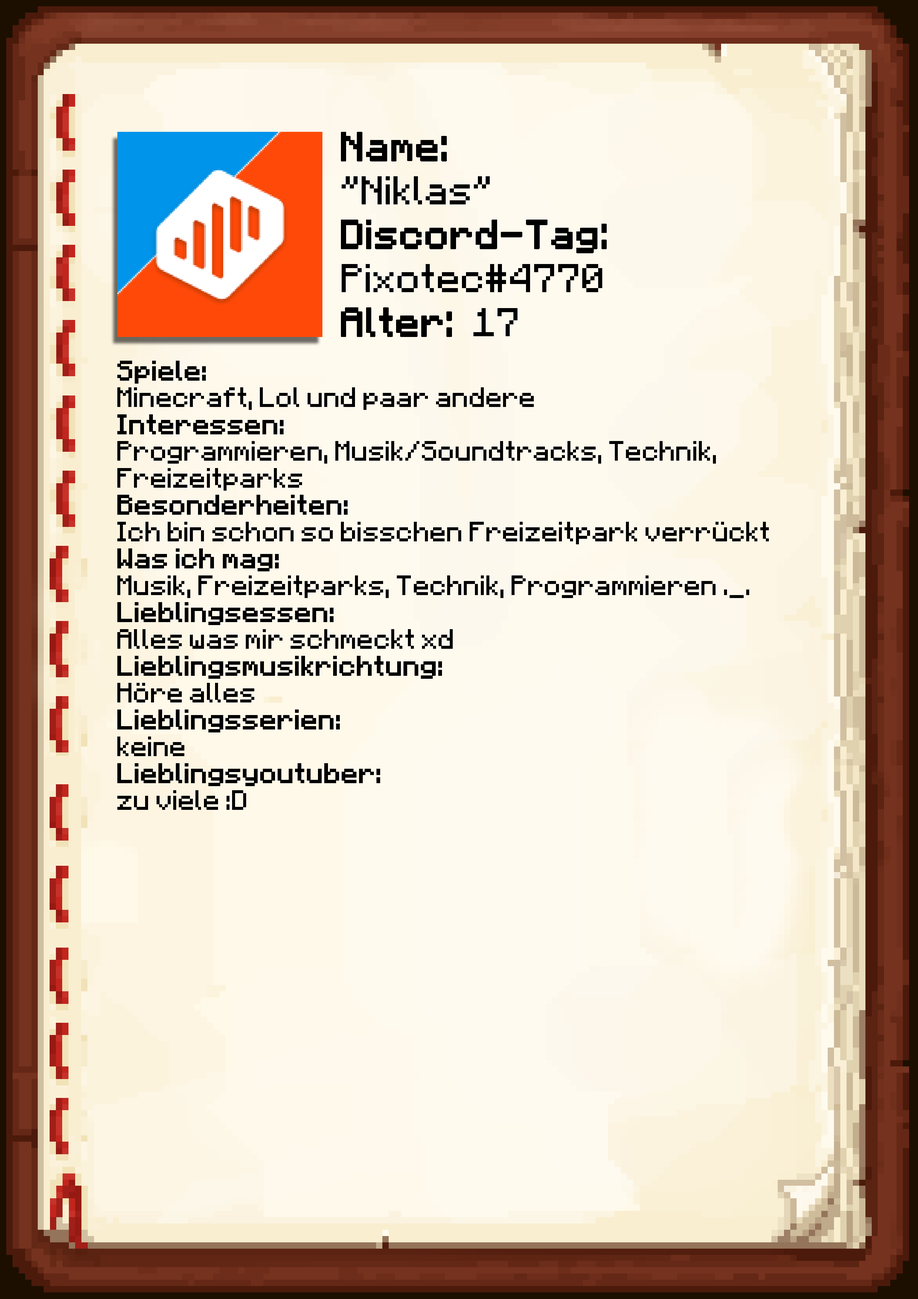
<style>
.page{position:relative;width:918px;height:1299px}
.page>*{position:absolute;margin:0}
.t1{font:40.1px/43.9px "Minecraft-Regular";color:#000000;font-weight:bold}
.t2{font:40.1px/43.9px "Minecraft-Regular";color:#000000}
.t3{font:22.4px "Minecraft";color:#000000}
.t4{font:22.4px "Minecraft";color:#000000;font-weight:bold}
</style>
<div class="page">
<p class="t1" style="left:341px;top:132px;width:266px;height:205px">Name:<br><span class="t2">"Niklas"<br></span>Discord-Tag:<br><span class="t2">Pixotec#4770<br></span>Alter: <span class="t2">17</span></p>
<p class="t3" style="left:117px;top:361px;width:652px;height:449px"><span class="t4">Spiele: <br></span>Minecraft, Lol und paar andere<br><span class="t4">Interessen:<br></span>Programmieren, Musik/Soundtracks, Technik, <br>Freizeitparks<br><span class="t4">Besonderheiten:<br></span>Ich bin schon so bisschen Freizeitpark verrückt<br><span class="t4">Was ich mag:<br></span>Musik, Freizeitparks, Technik, Programmieren ._.<br><span class="t4">Lieblingsessen:<br></span>Alles was mir schmeckt xd<br><span class="t4">Lieblingsmusikrichtung:<br></span>Höre alles<br><span class="t4">Lieblingsserien:<br></span>keine<br><span class="t4">Lieblingsyoutuber:<br></span>zu viele :D</p>
</div>
